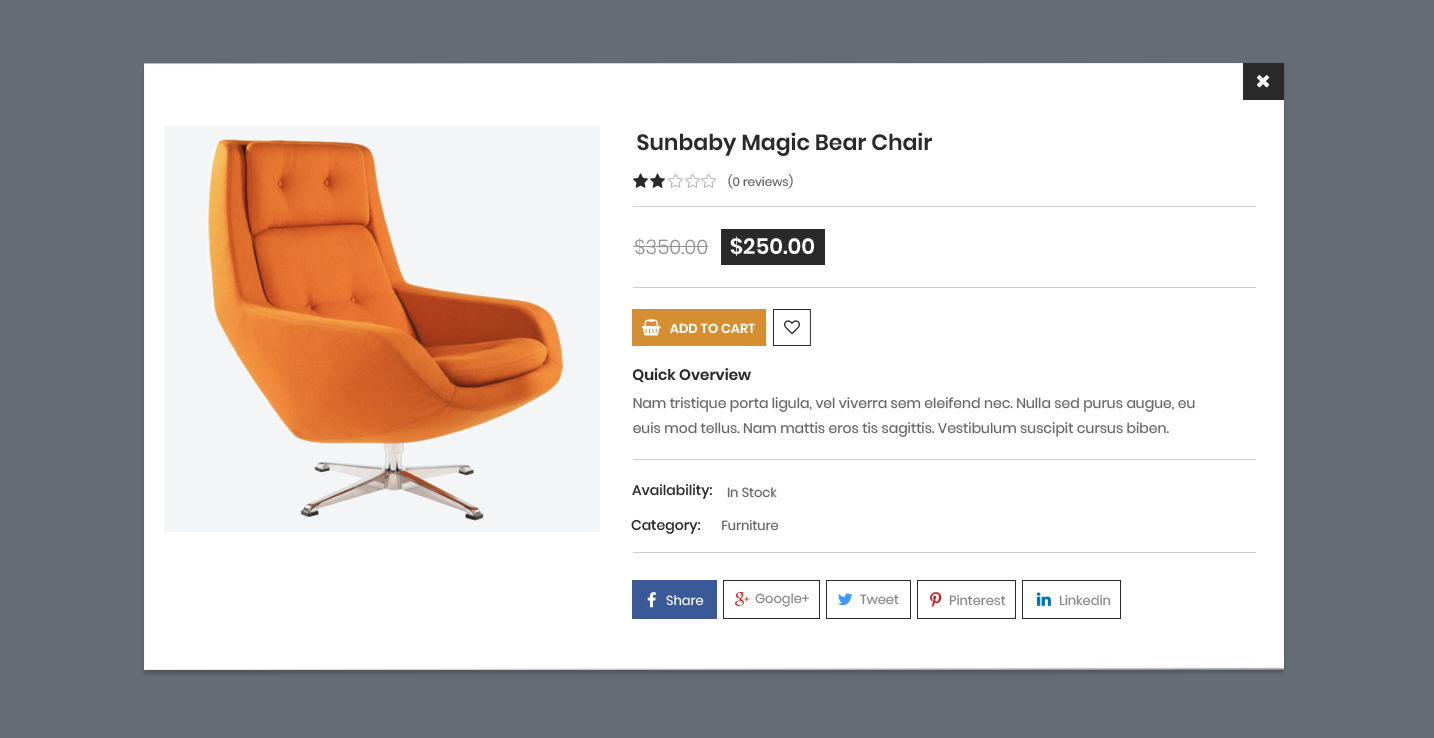
<style>
.page{position:relative;width:1434px;height:738px;background:#ffffff}
.page>*{position:absolute;margin:0}
.t1{font:22px "Poppins-SemiBold";color:#2a2a2a}
.t2{font:12px "Poppins-Regular";color:#676767}
.t3{font:20px "Poppins-Light";color:#939393}
.t4{font:22px "Poppins-SemiBold";color:#ffffff}
.t5{font:13px "Poppins-SemiBold";color:#ffffff;text-transform:uppercase}
.t6{font:15px "Poppins-SemiBold";color:#2a2a2a}
.t7{font:14px/25px "Poppins-Regular";color:#676767}
.t8{font:14px "Poppins-Medium";color:#2a2a2a}
.t9{font:13px "Poppins-Regular";color:#676767}
.t10{font:13px "Poppins-Regular";color:#888888}
.t11{font:13px "Poppins-Regular";color:#ffffff}
</style>
<div class="page">
<p class="t1" style="left:637px;top:132px;width:295px;height:24px">Sunbaby Magic Bear Chair</p>
<p class="t2" style="left:728px;top:174px;width:65px;height:15px">(0 reviews)</p>
<p class="t3" style="left:635px;top:238px;width:73px;height:18px">$350.00</p>
<p class="t4" style="left:730px;top:236px;width:84px;height:20px">$250.00</p>
<p class="t5" style="left:670px;top:323px;width:86px;height:11px">add to cart</p>
<p class="t6" style="left:632px;top:368px;width:119px;height:15px">Quick Overview</p>
<p class="t7" style="left:633px;top:397px;width:562px;height:40px">Nam tristique porta ligula, vel viverra sem eleifend nec. Nulla sed purus augue, eu euis mod tellus. Nam mattis eros tis sagittis. Vestibulum suscipit cursus biben.</p>
<p class="t8" style="left:632px;top:484px;width:80px;height:15px">Availability:</p>
<p class="t9" style="left:727px;top:487px;width:50px;height:11px">In Stock</p>
<p class="t8" style="left:631px;top:519px;width:148px;height:15px">Category:       <span class="t9">Furniture</span></p>
<p class="t10" style="left:755px;top:593px;width:54px;height:14px">Google+</p>
<p class="t11" style="left:666px;top:595px;width:38px;height:11px">Share</p>
<p class="t10" style="left:860px;top:594px;width:39px;height:11px">Tweet</p>
<p class="t10" style="left:949px;top:594px;width:57px;height:12px">Pinterest</p>
<p class="t10" style="left:1059px;top:594px;width:52px;height:12px">Linkedin</p>
</div>
